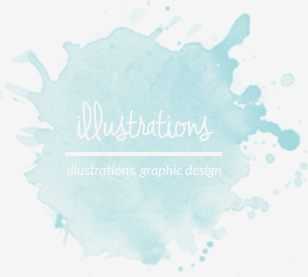
<style>
.page{position:relative;width:308px;height:277px;background:#f5f5f5}
.page>*{position:absolute;margin:0}
.t1{font:48px "JenniferLynne-Bold";color:#f5f5f5}
.t2{font:14px "Lato-Italic";color:#f5f5f5}
</style>
<div class="page">
<p class="t1" style="left:76px;top:101px;width:137px;height:40px">illustrations</p>
<p class="t2" style="left:67px;top:165px;width:155px;height:12px">illustrations, graphic design</p>
</div>
